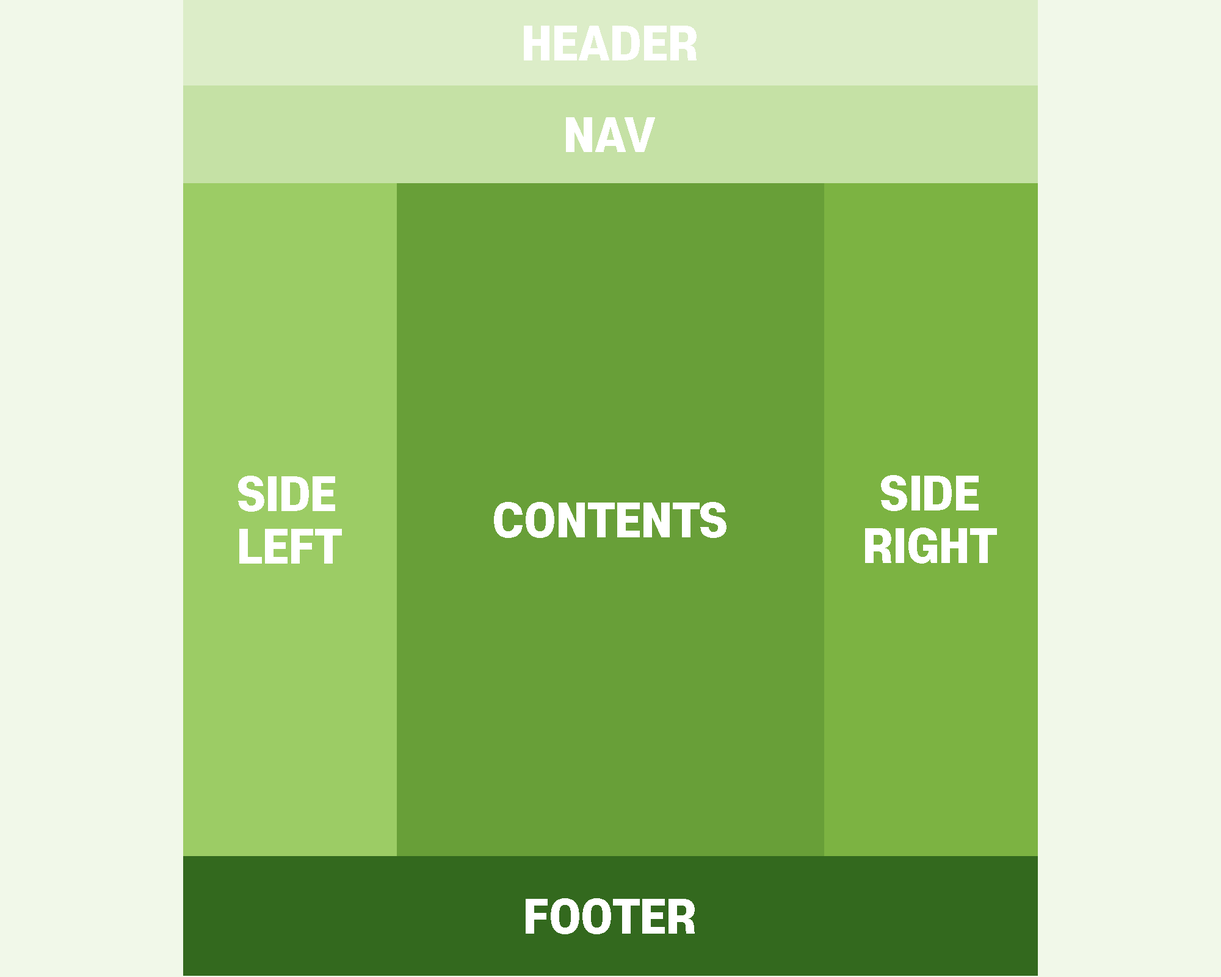
<style>
.page{position:relative;width:1221px;height:977px;background:#f1f8e9}
.page>*{position:absolute;margin:0}
.t1{font:44px "S-CoreDream-8Heavy";color:#ffffff}
</style>
<div class="page">
<p class="t1" style="left:524px;top:26px;width:173px;height:34px">HEADER</p>
<p class="t1" style="left:566px;top:117px;width:89px;height:35px">NAV</p>
<p class="t1" style="left:238px;top:476px;width:104px;height:87px">SIDE<br>LEFT</p>
<p class="t1" style="left:865px;top:475px;width:132px;height:88px;text-align:center">SIDE<br>RIGHT</p>
<p class="t1" style="left:494px;top:502px;width:232px;height:36px">CONTENTS</p>
<p class="t1" style="left:526px;top:898px;width:169px;height:36px">FOOTER</p>
</div>
